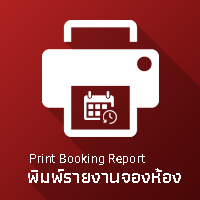
<style>
.page{position:relative;width:200px;height:200px}
.page>*{position:absolute;margin:0}
.t1{font:12.4px "Roboto-Regular";letter-spacing:0.01em;color:#ffffff}
.t2{font:18.8px "Athiti-SemiBold";letter-spacing:0.01em;color:#ffffff}
</style>
<div class="page">
<p class="t1" style="left:30px;top:154px;width:115px;height:11px">Print Booking Report</p>
<p class="t2" style="left:28px;top:168px;width:153px;height:15px">พิมพ์รายงานจองห้อง</p>
</div>
